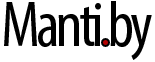
<style>
.page{position:relative;width:155px;height:62px;background:#ffffff}
.page>*{position:absolute;margin:0}
.t1{font:64.6px "MyriadPro-Cond";letter-spacing:-0.05em;color:#000000}
</style>
<div class="page">
<p class="t1" style="left:4px;top:1px;width:148px;height:59px">Manti by</p>
</div>
